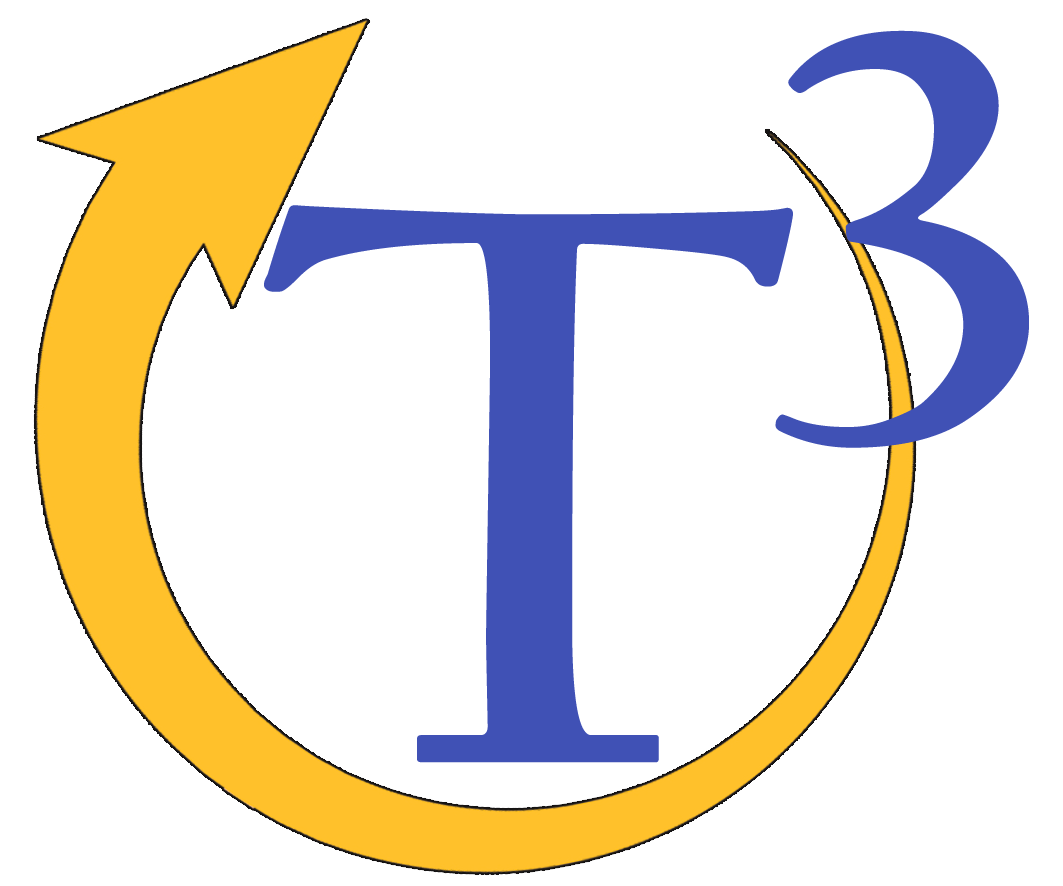
<style>
.page{position:relative;width:1063px;height:886px;background:#ffffff}
.page>*{position:absolute;margin:0}
.t1{font:625px "CalifornianFB-Bold";color:#4051b5}
.t2{font:833.3px "CalifornianFB-Bold";color:#4051b5}
</style>
<div class="page">
<p class="t1" style="left:775px;top:30px;width:254px;height:418px">3</p>
<p class="t2" style="left:264px;top:205px;width:529px;height:558px">T</p>
</div>
